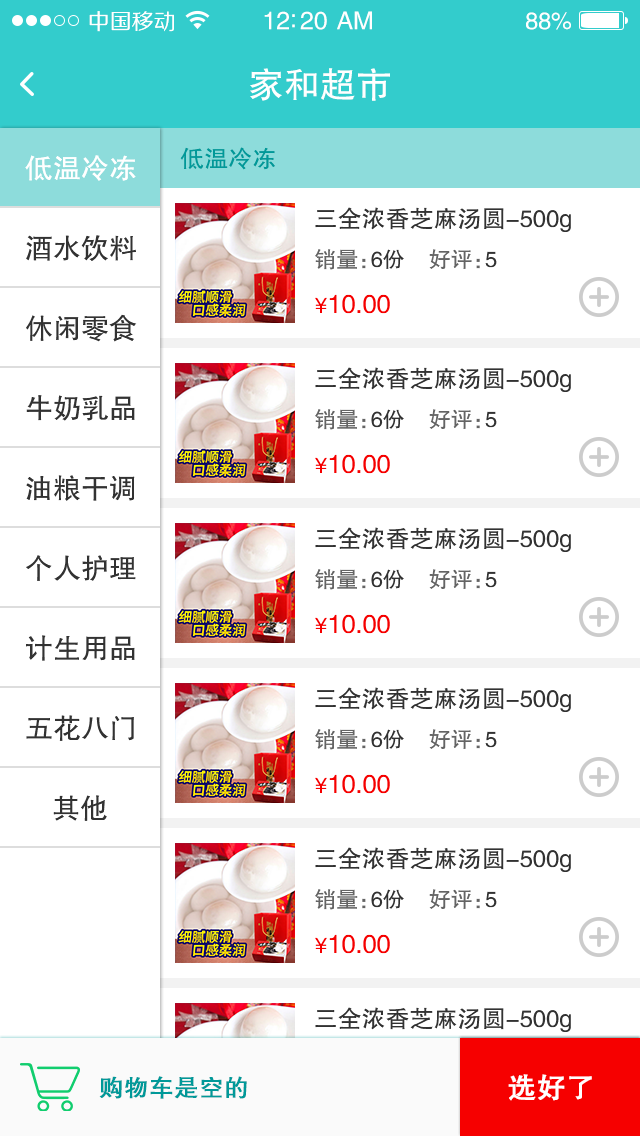
<style>
.page{position:relative;width:640px;height:1136px;background:#ffffff}
.page>*{position:absolute;margin:0}
.t1{font:22px "FZZHJW--GB1-0";color:#ffffff}
.t2{font:25px "FZHTJW--GB1-0";color:#ffffff}
.t3{font:24px "FZHTJW--GB1-0";letter-spacing:-0.02em;color:#ffffff}
.t4{font:36px "FZHTJW--GB1-0";color:#ffffff}
.t5{font:24px "FZHTJW--GB1-0";color:#009999}
.t6{font:28px "FZHTJW--GB1-0";color:#ffffff}
.t7{font:24px "FZHTJW--GB1-0";color:#323232}
.t8{font:28px "FZHTJW--GB1-0";color:#323232}
.t9{font:22px "FZHTJW--GB1-0";color:#646464}
.t10{font:22px "FZHTJW--GB1-0";color:#323232}
.t11{font:26px "FZHTJW--GB1-0";color:#f60000}
.t12{font:22px "FZHTJW--GB1-0";color:#f60000}
.t13{font:24px "FZHTJW--GB1-0";color:#009999;font-weight:bold}
.t14{font:28px "FZHTJW--GB1-0";color:#ffffff;font-weight:bold}
</style>
<div class="page">
<p class="t1" style="left:89px;top:11px;width:85px;height:21px">中国移动</p>
<p class="t2" style="left:264px;top:11px;width:108px;height:19px">12:20 AM</p>
<p class="t3" style="left:526px;top:12px;width:45px;height:18px">88%</p>
<p class="t4" style="left:250px;top:68px;width:140px;height:33px">家和超市</p>
<p class="t5" style="left:180px;top:147px;width:95px;height:23px">低温冷冻</p>
<p class="t6" style="left:25px;top:155px;width:111px;height:26px">低温冷冻</p>
<p class="t7" style="left:315px;top:207px;width:256px;height:25px">三全浓香芝麻汤圆-500g</p>
<p class="t8" style="left:26px;top:235px;width:110px;height:26px">酒水饮料</p>
<p class="t9" style="left:315px;top:249px;width:182px;height:21px">销量：<span class="t10">6份    </span>好评：<span class="t10">5</span></p>
<p class="t11" style="left:315px;top:294px;width:75px;height:20px"><span class="t12">￥</span>10.00</p>
<p class="t8" style="left:26px;top:314px;width:111px;height:28px">休闲零食</p>
<p class="t7" style="left:315px;top:367px;width:256px;height:25px">三全浓香芝麻汤圆-500g</p>
<p class="t8" style="left:26px;top:395px;width:109px;height:26px">牛奶乳品</p>
<p class="t9" style="left:315px;top:409px;width:182px;height:21px">销量：<span class="t10">6份    </span>好评：<span class="t10">5</span></p>
<p class="t11" style="left:315px;top:454px;width:75px;height:20px"><span class="t12">￥</span>10.00</p>
<p class="t8" style="left:26px;top:475px;width:109px;height:26px">油粮干调</p>
<p class="t7" style="left:315px;top:527px;width:256px;height:25px">三全浓香芝麻汤圆-500g</p>
<p class="t8" style="left:26px;top:555px;width:110px;height:26px">个人护理</p>
<p class="t9" style="left:315px;top:569px;width:182px;height:21px">销量：<span class="t10">6份    </span>好评：<span class="t10">5</span></p>
<p class="t11" style="left:315px;top:614px;width:75px;height:20px"><span class="t12">￥</span>10.00</p>
<p class="t8" style="left:26px;top:635px;width:109px;height:26px">计生用品</p>
<p class="t7" style="left:315px;top:687px;width:256px;height:25px">三全浓香芝麻汤圆-500g</p>
<p class="t8" style="left:26px;top:715px;width:108px;height:26px">五花八门</p>
<p class="t9" style="left:315px;top:729px;width:182px;height:21px">销量：<span class="t10">6份    </span>好评：<span class="t10">5</span></p>
<p class="t11" style="left:315px;top:774px;width:75px;height:20px"><span class="t12">￥</span>10.00</p>
<p class="t8" style="left:53px;top:795px;width:54px;height:26px">其他</p>
<p class="t7" style="left:315px;top:847px;width:256px;height:25px">三全浓香芝麻汤圆-500g</p>
<p class="t9" style="left:315px;top:889px;width:182px;height:21px">销量：<span class="t10">6份    </span>好评：<span class="t10">5</span></p>
<p class="t11" style="left:315px;top:934px;width:75px;height:20px"><span class="t12">￥</span>10.00</p>
<p class="t7" style="left:315px;top:1007px;width:256px;height:25px">三全浓香芝麻汤圆-500g</p>
<p class="t13" style="left:99px;top:1076px;width:148px;height:23px">购物车是空的</p>
<p class="t14" style="left:508px;top:1074px;width:84px;height:27px">选好了</p>
</div>
